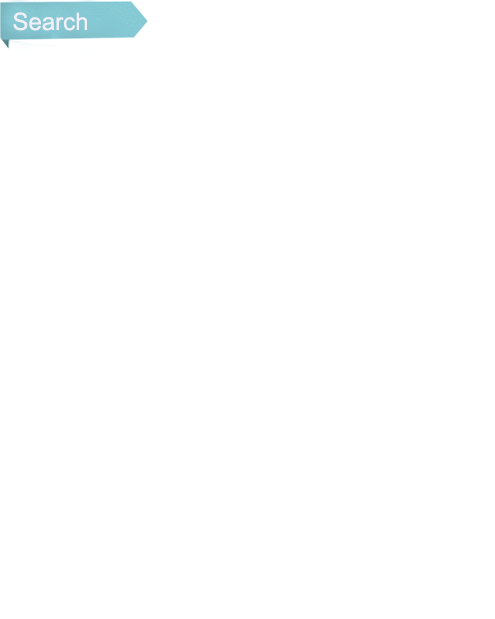
<style>
.page{position:relative;width:495px;height:619px;background:#ffffff}
.page>*{position:absolute;margin:0}
.t1{font:24px "DokChampa";color:#f3eff7}
</style>
<div class="page">
<p class="t1" style="left:13px;top:12px;width:74px;height:19px">Search</p>
</div>
